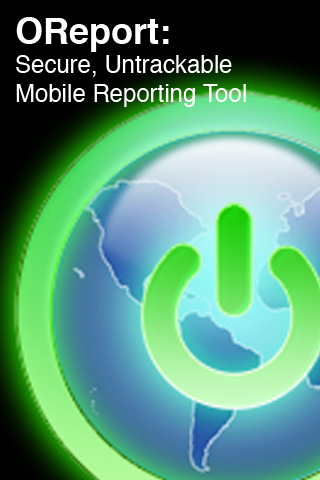
<style>
.page{position:relative;width:320px;height:480px}
.page>*{position:absolute;margin:0}
.t1{font:24px "Helvetica";color:#ffffff}
.t2{font:36px "Helvetica-Bold";color:#ffffff}
</style>
<div class="page">
<p class="t1" style="left:16px;top:17px;width:230px;height:90px"><span class="t2">OReport:<br></span>Secure, Untrackable<br>Mobile Reporting Tool</p>
</div>
